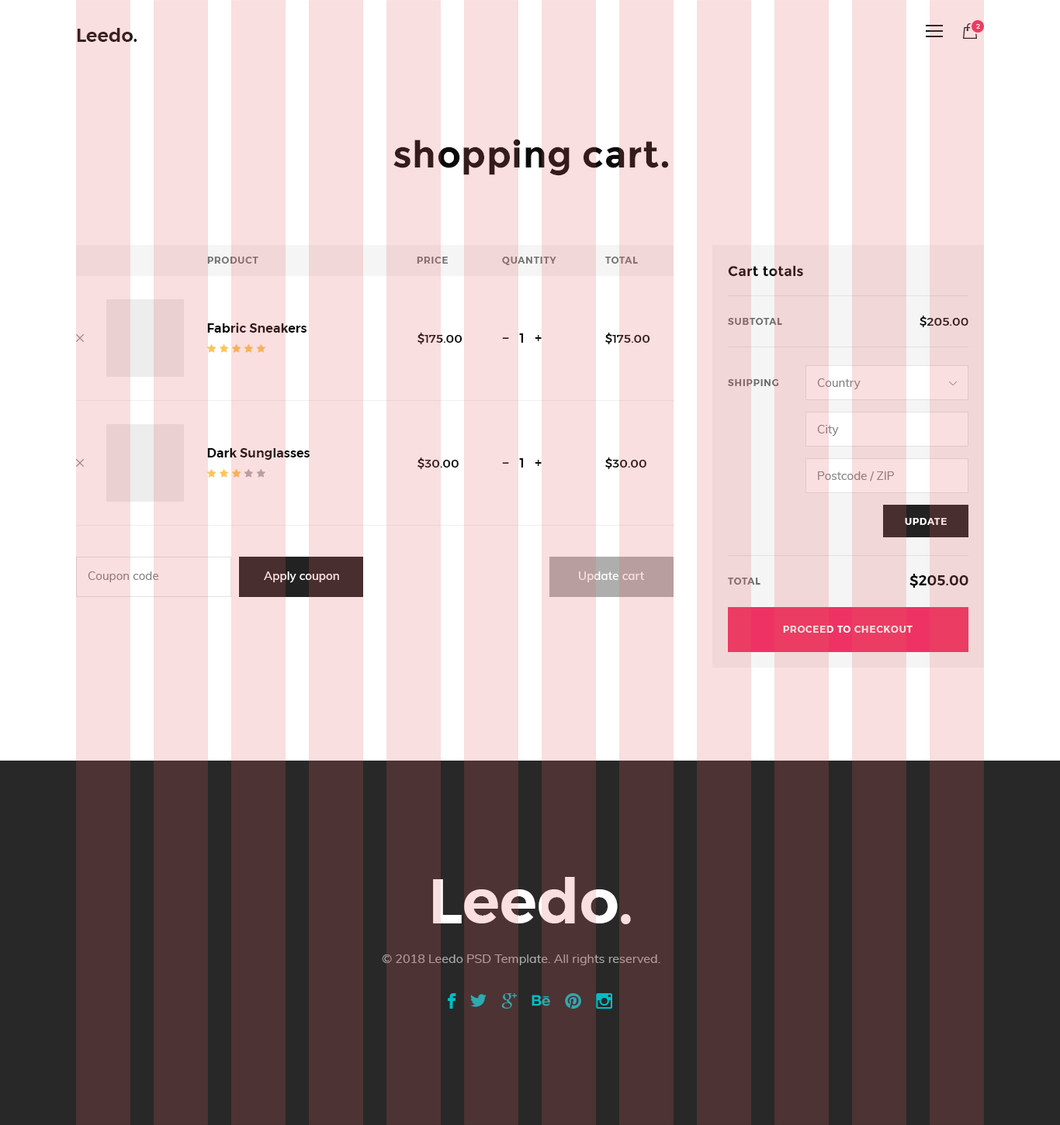
<style>
.page{position:relative;width:1060px;height:1125px;background:#f9dfdf}
.page>*{position:absolute;margin:0}
.t1{font:18.6px "Montserrat-SemiBold";color:#3a2020}
.t2{font:6.2px "Montserrat-Medium";letter-spacing:0.05em;color:#f9dfdf;text-transform:uppercase}
.t3{font:37.2px "Montserrat-Bold";letter-spacing:0.01em;color:#351c1c}
.t4{font:9.3px "Montserrat-SemiBold";letter-spacing:0.075em;color:#717171;text-transform:uppercase}
.t5{font:14px "Montserrat-Bold";letter-spacing:0.005em;color:#351c1c}
.t6{font:11.6px "Montserrat-Medium";letter-spacing:0.005em;color:#351c1c}
.t7{font:12.4px "Montserrat-SemiBold";letter-spacing:0.005em}
.t8{font:9.3px "Montserrat-SemiBold";letter-spacing:0.075em;color:#6b6b6b;text-transform:uppercase}
.t9{font:11.6px "Montserrat-Medium";letter-spacing:0.005em}
.t10{font:14px "Montserrat-Medium";letter-spacing:0.005em;color:#0b0b0b}
.t11{font:12.4px "Montserrat-Medium";letter-spacing:0.005em;color:#0b0b0b}
.t12{font:11.6px "Muli-Regular";letter-spacing:0.005em;color:#818181}
.t13{font:9.3px "Montserrat-SemiBold";letter-spacing:0.075em;text-transform:uppercase}
.t14{font:11.6px "Muli-SemiBold";letter-spacing:0.005em;color:#f9dfdf}
.t15{font:11.6px "Muli-SemiBold";letter-spacing:0.005em}
.t16{font:14px "Montserrat-SemiBold";letter-spacing:0.005em}
.t17{font:9.3px "Montserrat-SemiBold";letter-spacing:0.075em;color:#f9dfdf;text-transform:uppercase}
.t18{font:62.1px "Montserrat-SemiBold";color:#f9dfdf}
.t19{font:12.4px "Muli-Regular";color:#a7a7a7}
</style>
<div class="page">
<p class="t1" style="left:77px;top:28px;width:60px;height:14px">Leedo.</p>
<p class="t2" style="left:976px;top:24px;width:4px;height:5px">2</p>
<p class="t3" style="left:393px;top:139px;width:276px;height:37px">shopping cart.</p>
<p class="t4" style="left:207px;top:257px;width:51px;height:7px">product</p>
<p class="t4" style="left:417px;top:257px;width:31px;height:7px">price</p>
<p class="t4" style="left:502px;top:257px;width:54px;height:8px">quantity</p>
<p class="t4" style="left:605px;top:257px;width:33px;height:7px">total</p>
<p class="t5" style="left:728px;top:265px;width:75px;height:12px">Cart totals</p>
<p class="t6" style="left:919px;top:316px;width:49px;height:11px">$205.00</p>
<p class="t7" style="left:207px;top:323px;width:99px;height:10px">Fabric Sneakers</p>
<p class="t8" style="left:728px;top:318px;width:54px;height:7px">Subtotal</p>
<p class="t9" style="left:417px;top:333px;width:45px;height:11px">$175.00</p>
<p class="t10" style="left:502px;top:334px;width:39px;height:9px">−   <span class="t11">1</span>   +</p>
<p class="t9" style="left:605px;top:333px;width:45px;height:11px">$175.00</p>
<p class="t8" style="left:728px;top:379px;width:51px;height:7px">Shipping</p>
<p class="t12" style="left:817px;top:379px;width:43px;height:11px">Country</p>
<p class="t12" style="left:817px;top:425px;width:21px;height:12px">City</p>
<p class="t7" style="left:207px;top:448px;width:102px;height:12px">Dark Sunglasses</p>
<p class="t9" style="left:417px;top:458px;width:41px;height:11px">$30.00</p>
<p class="t10" style="left:502px;top:458px;width:39px;height:10px">−   <span class="t11">1</span>   +</p>
<p class="t9" style="left:605px;top:458px;width:41px;height:11px">$30.00</p>
<p class="t12" style="left:818px;top:472px;width:76px;height:10px">Postcode / ZIP</p>
<p class="t13" style="left:904px;top:518px;width:42px;height:7px">update</p>
<p class="t12" style="left:88px;top:572px;width:71px;height:11px">Coupon code</p>
<p class="t14" style="left:264px;top:572px;width:75px;height:11px">Apply coupon</p>
<p class="t15" style="left:579px;top:572px;width:65px;height:11px">Update cart</p>
<p class="t8" style="left:728px;top:578px;width:32px;height:7px">total</p>
<p class="t16" style="left:909px;top:574px;width:59px;height:14px">$205.00</p>
<p class="t17" style="left:783px;top:626px;width:129px;height:7px">proceed to checkout</p>
<p class="t18" style="left:433px;top:877px;width:198px;height:48px">Leedo.</p>
<p class="t19" style="left:382px;top:955px;width:278px;height:11px">© 2018 Leedo PSD Template. All rights reserved.</p>
</div>
